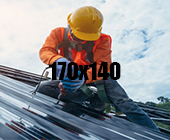
<style>
.page{position:relative;width:170px;height:140px}
.page>*{position:absolute;margin:0}
.t1{font:23px "Impact";color:#000000}
</style>
<div class="page">
<p class="t1" style="left:48px;top:62px;width:73px;height:18px">170x140</p>
</div>
